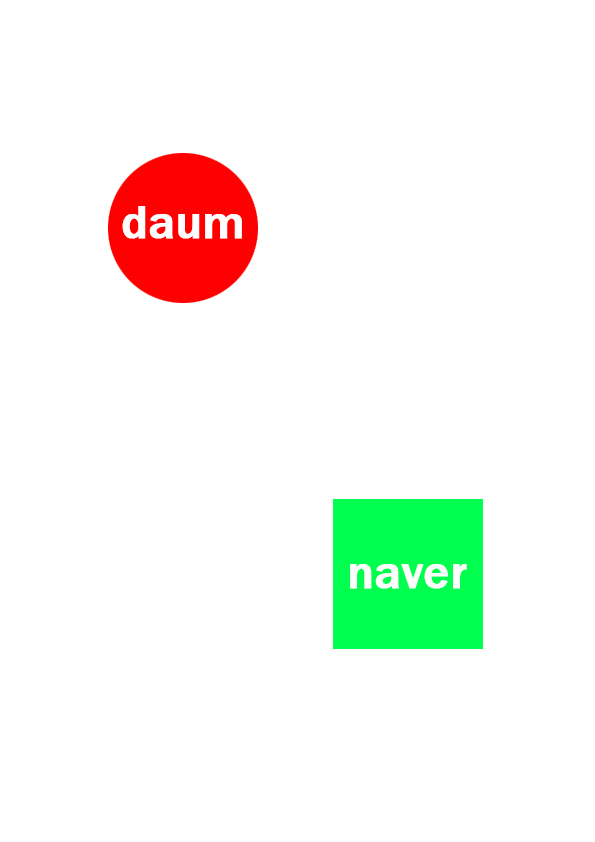
<style>
.page{position:relative;width:595px;height:842px;background:#ffffff}
.page>*{position:absolute;margin:0}
.t1{font:48px "FranklinGothic-Medium";color:#ffffff;font-weight:bold}
</style>
<div class="page">
<p class="t1" style="left:122px;top:206px;width:120px;height:33px">daum</p>
<p class="t1" style="left:350px;top:564px;width:117px;height:25px">naver</p>
</div>
